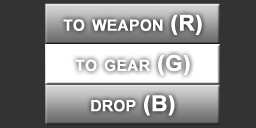
<style>
.page{position:relative;width:256px;height:128px;background:#333333}
.page>*{position:absolute;margin:0}
.t1{font:21.7px "Arial-BoldMT";letter-spacing:0.01em;color:#ffffff;font-variant:small-caps;font-weight:bold}
</style>
<div class="page">
<p class="t1" style="left:63px;top:14px;width:139px;height:21px">to weapon (R)</p>
<p class="t1" style="left:75px;top:54px;width:115px;height:22px">to gear (G)</p>
<p class="t1" style="left:91px;top:95px;width:84px;height:21px">drop (B)</p>
</div>
